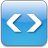
<style>
.page{position:relative;width:48px;height:48px}
.page>*{position:absolute;margin:0}
.t1{font:41.7px "GadgetRegular";color:#ffffff}
</style>
<div class="page">
<p class="t1" style="left:6px;top:14px;width:36px;height:18px">&lt;&gt;</p>
</div>
